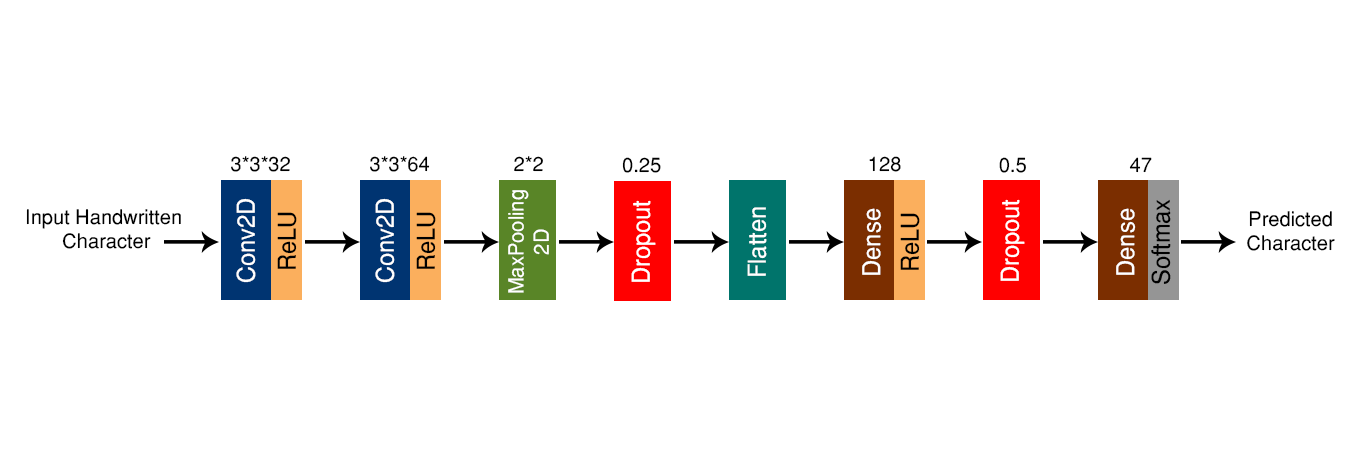
<style>
.page{position:relative;width:1371px;height:455px;background:#ffffff}
.page>*{position:absolute;margin:0}
.t1{font:20px "Helvetica-Normal";color:#000000}
.t2{font:24.7px "Helvetica-Normal";color:#ffffff;scale:0.95 1}
.t3{font:21.1px "Helvetica-Normal";color:#ffffff;scale:0.95 1}
.t4{font:24.7px "Helvetica-Normal";color:#000000;scale:0.95 1}
</style>
<div class="page">
<p class="t1" style="left:231px;top:156px;width:59px;height:16px">3*3*32</p>
<p class="t1" style="left:370px;top:156px;width:60px;height:16px">3*3*64</p>
<p class="t1" style="left:514px;top:156px;width:29px;height:16px">2*2</p>
<p class="t1" style="left:622px;top:157px;width:39px;height:16px">0.25</p>
<p class="t1" style="left:869px;top:156px;width:32px;height:16px">128</p>
<p class="t1" style="left:999px;top:157px;width:27px;height:16px">0.5</p>
<p class="t1" style="left:1129px;top:157px;width:23px;height:16px">47</p>
<p class="t2" style="left:236px;top:198px;width:20px;height:85px;rotate:-90deg">Conv2D</p>
<p class="t2" style="left:375px;top:198px;width:20px;height:85px;rotate:-90deg">Conv2D</p>
<p class="t3" style="left:508px;top:190px;width:41px;height:103px;text-align:center;rotate:-90deg">MaxPooling<br>2D</p>
<p class="t1" style="left:26px;top:209px;width:155px;height:40px;text-align:center">Input Handwritten<br> Character</p>
<p class="t2" style="left:631px;top:200px;width:25px;height:82px;rotate:-90deg">Dropout</p>
<p class="t2" style="left:747px;top:207px;width:20px;height:69px;rotate:-90deg">Flatten</p>
<p class="t2" style="left:862px;top:208px;width:20px;height:67px;rotate:-90deg">Dense</p>
<p class="t2" style="left:1000px;top:199px;width:25px;height:82px;rotate:-90deg">Dropout</p>
<p class="t2" style="left:1116px;top:208px;width:20px;height:67px;rotate:-90deg">Dense</p>
<p class="t4" style="left:1151px;top:199px;width:20px;height:85px;rotate:-90deg">Softmax</p>
<p class="t4" style="left:277px;top:212px;width:20px;height:57px;rotate:-90deg">ReLU</p>
<p class="t4" style="left:416px;top:212px;width:20px;height:57px;rotate:-90deg">ReLU</p>
<p class="t4" style="left:900px;top:213px;width:20px;height:57px;rotate:-90deg">ReLU</p>
<p class="t1" style="left:1247px;top:211px;width:88px;height:40px;text-align:center">Predicted<br>Character</p>
</div>
